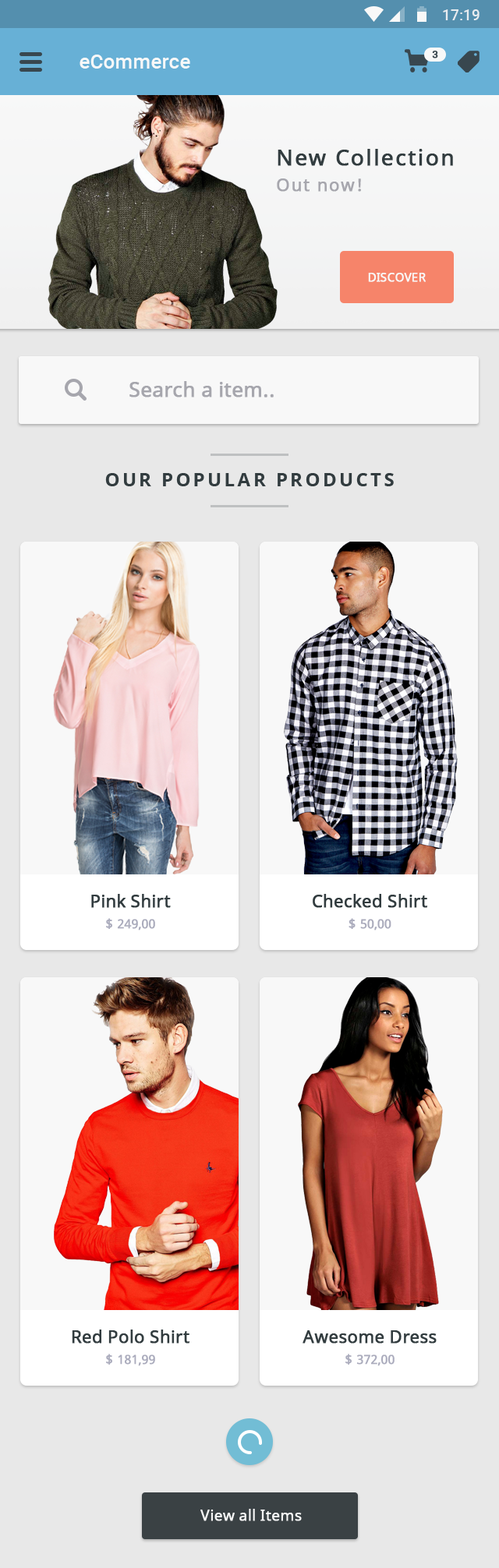
<style>
.page{position:relative;width:499px;height:1568px;background:#e8e8e8}
.page>*{position:absolute;margin:0}
.t1{font:14.8px "Roboto-Medium";color:#e8ecf0}
.t2{font:10.1px "Roboto-Medium";letter-spacing:0.04em;color:#38474f;text-transform:uppercase;font-weight:bold}
.t3{font:20.3px "Roboto-Medium";color:#f8f8f8}
.t4{font:21.8px/25.7px "NotoSans";letter-spacing:0.06em;color:#323c3f;font-weight:bold}
.t5{font:17.1px/25.7px "NotoSans";letter-spacing:0.06em;color:#a6a6ad;font-weight:bold}
.t6{font:11.7px "NotoSans";color:#f8f8f8;text-transform:uppercase;font-weight:bold}
.t7{font:20.3px "NotoSans";color:#a6a6ad;font-weight:bold}
.t8{font:18.7px "NotoSans-Bold";letter-spacing:0.14em;color:#323c3f;text-transform:uppercase}
.t9{font:17.1px/21px "NotoSans";color:#323c3f;font-weight:bold}
.t10{font:12.5px/21px "NotoSans";color:#aaabbc;font-weight:bold}
.t11{font:14.8px "NotoSans";letter-spacing:0.015em;color:#f8f8f8;font-weight:bold}
</style>
<div class="page">
<p class="t1" style="left:443px;top:9px;width:36px;height:11px">17:19</p>
<p class="t2" style="left:432px;top:51px;width:6px;height:7px">3</p>
<p class="t3" style="left:79px;top:55px;width:111px;height:14px">eCommerce</p>
<p class="t4" style="left:277px;top:149px;width:176px;height:43px">New Collection<br><span class="t5">Out now!</span></p>
<p class="t6" style="left:368px;top:273px;width:58px;height:9px">discover</p>
<p class="t7" style="left:129px;top:381px;width:145px;height:16px">Search a item..</p>
<p class="t8" style="left:105px;top:473px;width:289px;height:13px">Our popular products</p>
<p class="t9" style="left:91px;top:894px;width:80px;height:37px;text-align:center">Pink Shirt<br><span class="t10">$ 249,00</span></p>
<p class="t9" style="left:313px;top:894px;width:114px;height:37px;text-align:center">Checked Shirt<br><span class="t10">$ 50,00</span></p>
<p class="t9" style="left:72px;top:1330px;width:117px;height:36px;text-align:center">Red Polo Shirt<br><span class="t10">$ 181,99</span></p>
<p class="t9" style="left:302px;top:1330px;width:134px;height:36px;text-align:center">Awesome Dress<br><span class="t10">$ 372,00</span></p>
<p class="t11" style="left:200px;top:1509px;width:102px;height:12px">View all Items</p>
</div>
